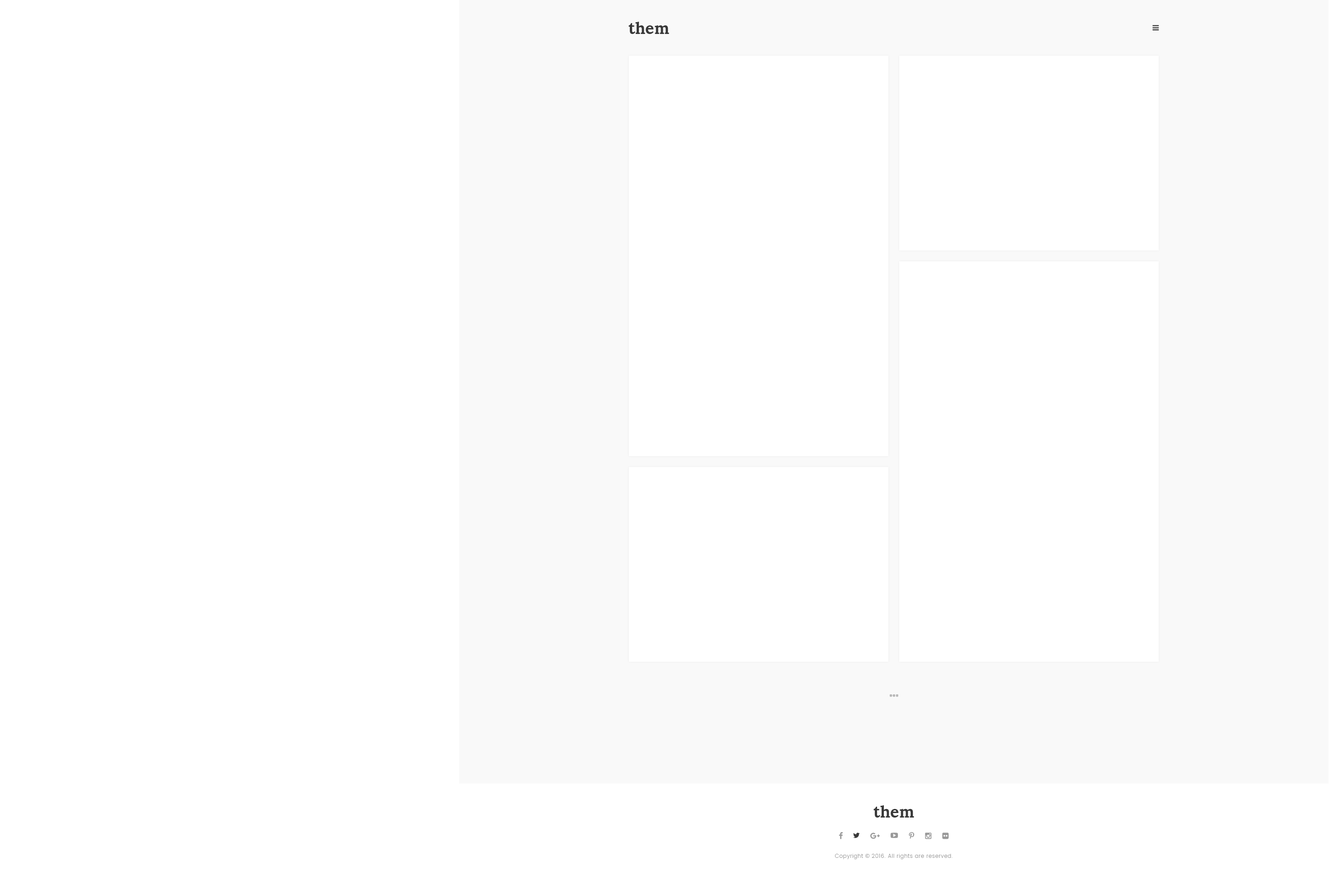
<style>
.page{position:relative;width:1333px;height:895px;background:#ffffff}
.page>*{position:absolute;margin:0}
.t1{font:16.3px "Lora-Bold";color:#393939}
.t2{font:5.4px "Poppins-Light";letter-spacing:0.05em;color:#999999}
.t3{font:5.4px "OpenSans";letter-spacing:0.05em;color:#999999}
</style>
<div class="page">
<p class="t1" style="left:628px;top:22px;width:41px;height:12px">them</p>
<p class="t1" style="left:873px;top:805px;width:41px;height:12px">them</p>
<p class="t2" style="left:835px;top:853px;width:118px;height:6px">Copyright <span class="t3">© </span>2016. All rights are reserved.</p>
</div>
